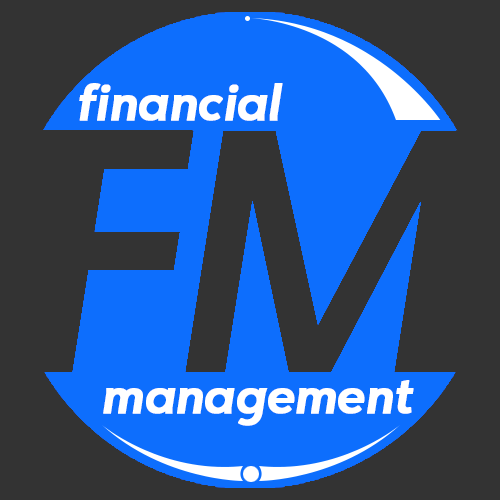
<style>
.page{position:relative;width:500px;height:500px;background:#333333}
.page>*{position:absolute;margin:0}
.t1{font:49.1px "FONTSPRINGDEMO-PGF-QualtaMedium-ItalicRegular";color:#ffffff;font-weight:bold}
</style>
<div class="page">
<p class="t1" style="left:79px;top:83px;width:204px;height:38px">financial</p>
<p class="t1" style="left:103px;top:380px;width:311px;height:46px">management</p>
</div>
